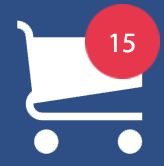
<style>
.page{position:relative;width:164px;height:166px;background:#2d4f86}
.page>*{position:absolute;margin:0}
.t1{font:28px "MyriadPro-Regular";color:#ffffff}
</style>
<div class="page">
<p class="t1" style="left:110px;top:33px;width:25px;height:20px">15</p>
</div>
